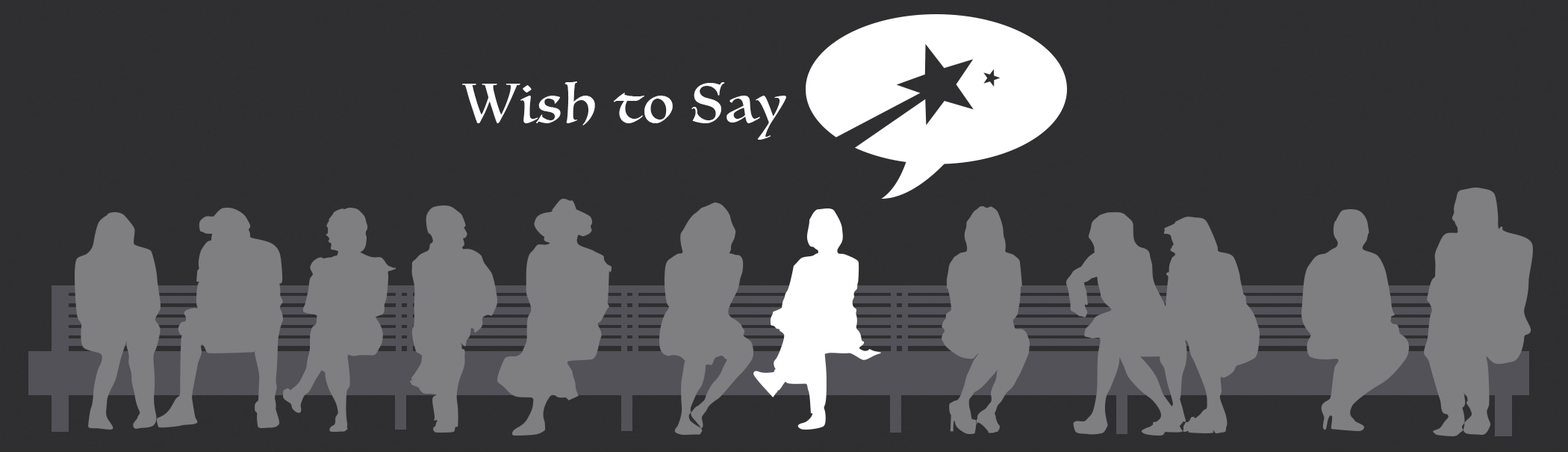
<style>
.page{position:relative;width:1568px;height:452px;background:#2f2e30}
.page>*{position:absolute;margin:0}
.t1{font:53.8px "Luminari-Regular";letter-spacing:0.05em;color:#ffffff}
</style>
<div class="page">
<p class="t1" style="left:462px;top:81px;width:324px;height:59px">Wish to Say</p>
</div>
